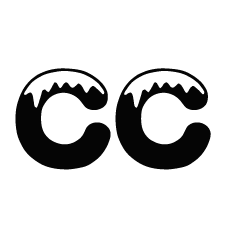
<style>
.page{position:relative;width:228px;height:225px;background:#ffffff}
.page>*{position:absolute;margin:0}
.t1{font:150px "jaffer-Regular";color:#050505}
</style>
<div class="page">
<p class="t1" style="left:15px;top:68px;width:196px;height:102px">CC</p>
</div>
